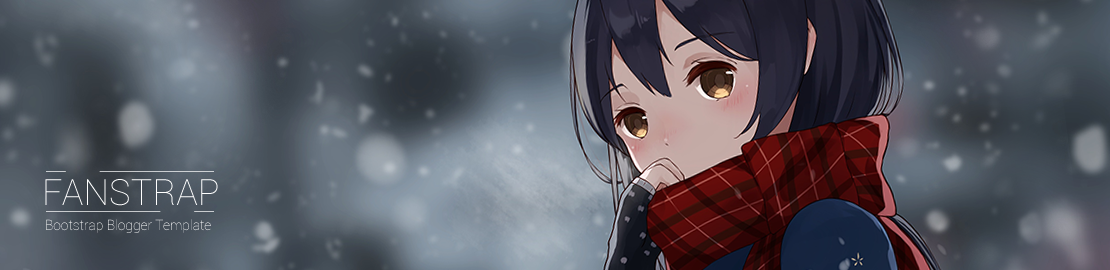
<style>
.page{position:relative;width:1110px;height:270px}
.page>*{position:absolute;margin:0}
.t1{font:36px "Roboto-Thin";letter-spacing:0.005em;color:#ffffff}
.t2{font:14px "Roboto-Thin";letter-spacing:0.005em}
</style>
<div class="page">
<p class="t1" style="left:45px;top:179px;width:173px;height:27px">FANSTRAP</p>
<p class="t2" style="left:46px;top:219px;width:165px;height:14px">Bootstrap Blogger Template</p>
</div>
